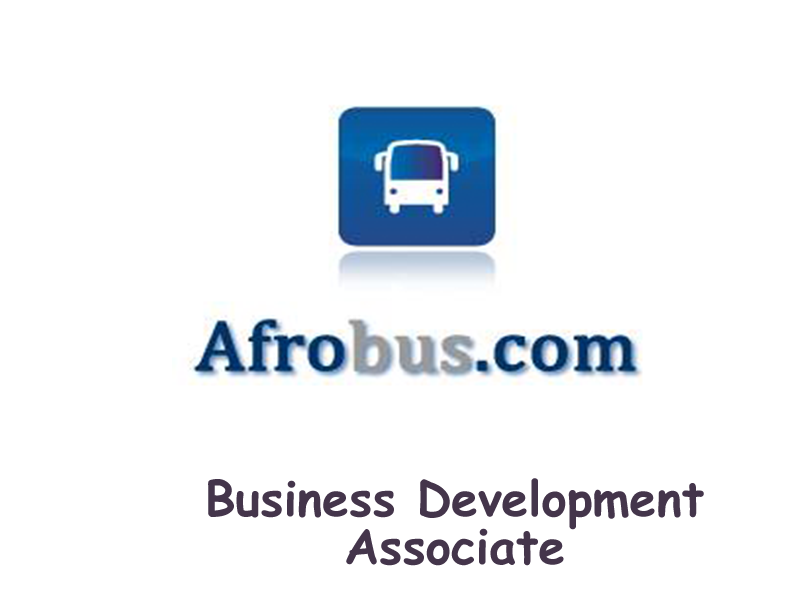
<style>
.page{position:relative;width:800px;height:600px;background:#ffffff}
.page>*{position:absolute;margin:0}
.t1{font:48px/48px "ComicSansMS-Bold";color:#44354b}
</style>
<div class="page">
<p class="t1" style="left:208px;top:478px;width:496px;height:88px;text-align:center">Business Development Associate</p>
</div>
